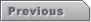
<style>
.page{position:relative;width:91px;height:22px}
.page>*{position:absolute;margin:0}
.t1{font:11px "Arial-Black";letter-spacing:0.05em;color:#656876}
</style>
<div class="page">
<p class="t1" style="left:8px;top:7px;width:56px;height:9px">Previous</p>
</div>
